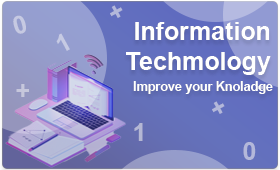
<style>
.page{position:relative;width:280px;height:170px}
.page>*{position:absolute;margin:0}
.t1{font:25px "Arial-BoldMT";color:#b3b8da}
.t2{font:25px "Arial-BoldMT";color:#c6c9e2}
.t3{font:25px "Arial-BoldMT";color:#ffffff}
.t4{font:25px "Arial-BoldMT";color:#c6cae3}
.t5{font:25px "Arial-BoldMT";color:#c6c7dc}
.t6{font:12.5px "Arial-BoldMT";color:#ffffff}
.t7{font:25px "Arial-BoldMT";color:#b4b7d4}
.t8{font:25px "Arial-BoldMT";color:#b4b8da}
</style>
<div class="page">
<p class="t1" style="left:110px;top:5px;width:13px;height:13px;rotate:-29deg">+</p>
<p class="t2" style="left:13px;top:15px;width:13px;height:19px;rotate:-16deg">0</p>
<p class="t3" style="left:126px;top:22px;width:145px;height:53px;text-align:right">Information<br>Techmology</p>
<p class="t4" style="left:56px;top:33px;width:14px;height:18px;rotate:-29deg">1</p>
<p class="t5" style="left:16px;top:84px;width:13px;height:13px">+</p>
<p class="t6" style="left:133px;top:81px;width:140px;height:13px">Improve your Knoladge</p>
<p class="t1" style="left:212px;top:101px;width:13px;height:13px;rotate:-29deg">+</p>
<p class="t7" style="left:134px;top:123px;width:9px;height:18px">1</p>
<p class="t8" style="left:243px;top:142px;width:13px;height:18px">0</p>
</div>
